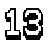
<style>
.page{position:relative;width:48px;height:48px;background:#ffffff}
.page>*{position:absolute;margin:0}
.t1{font:36px "KarmaFuture-Regular";color:#010101}
</style>
<div class="page">
<p class="t1" style="left:5px;top:8px;width:38px;height:32px">13</p>
</div>
